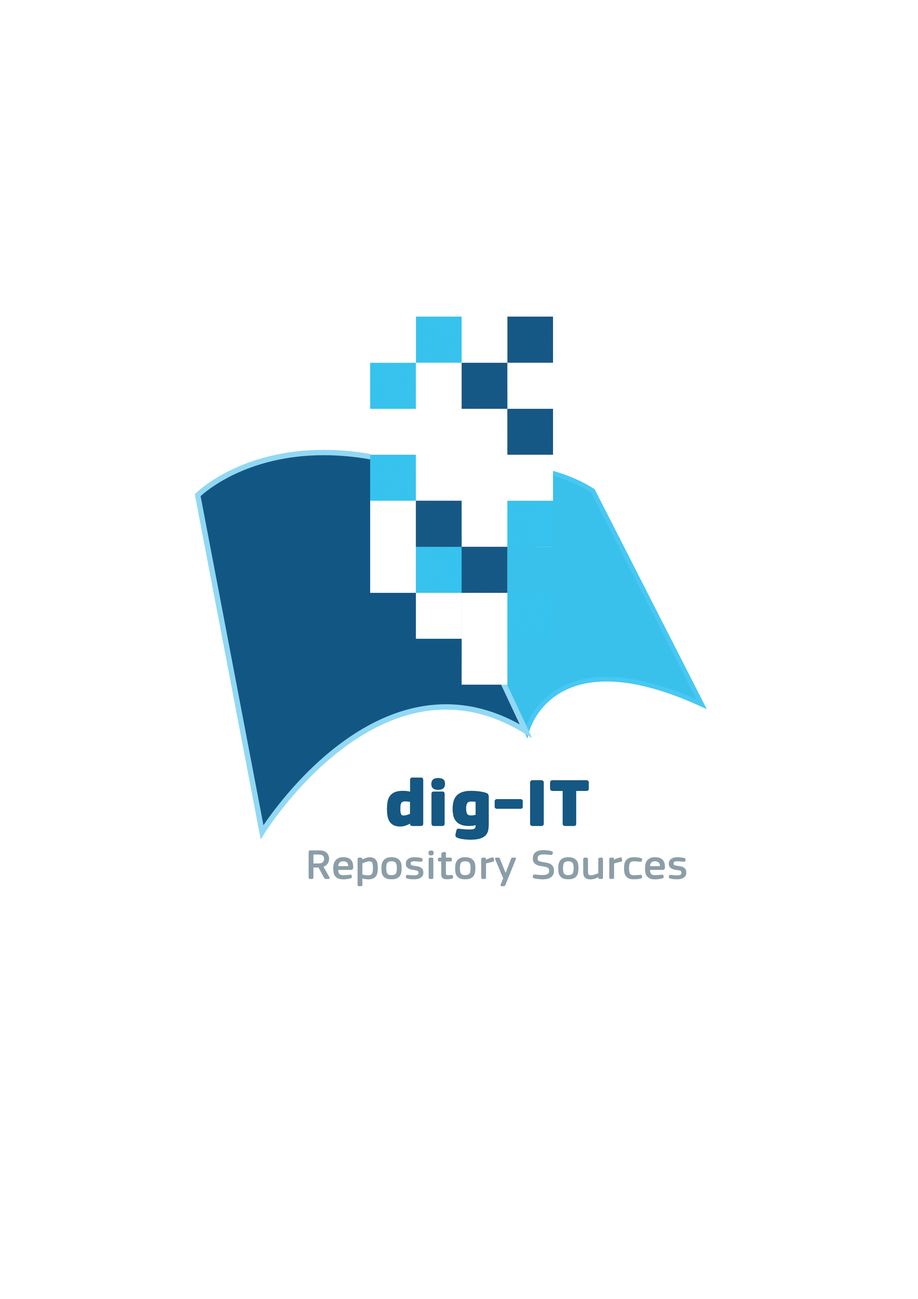
<style>
.page{position:relative;width:918px;height:1299px;background:#ffffff}
.page>*{position:absolute;margin:0}
.t1{font:65.9px "ECSquareSansPro-Bold";color:#155883;font-weight:bold;scale:1.12 1}
.t2{font:41.2px "ECSquareSansPro";color:#8b9ea8;font-weight:bold;scale:1.12 1}
</style>
<div class="page">
<p class="t1" style="left:387px;top:777px;width:202px;height:63px">dig-IT</p>
<p class="t2" style="left:308px;top:850px;width:378px;height:36px">Repository Sources</p>
</div>
